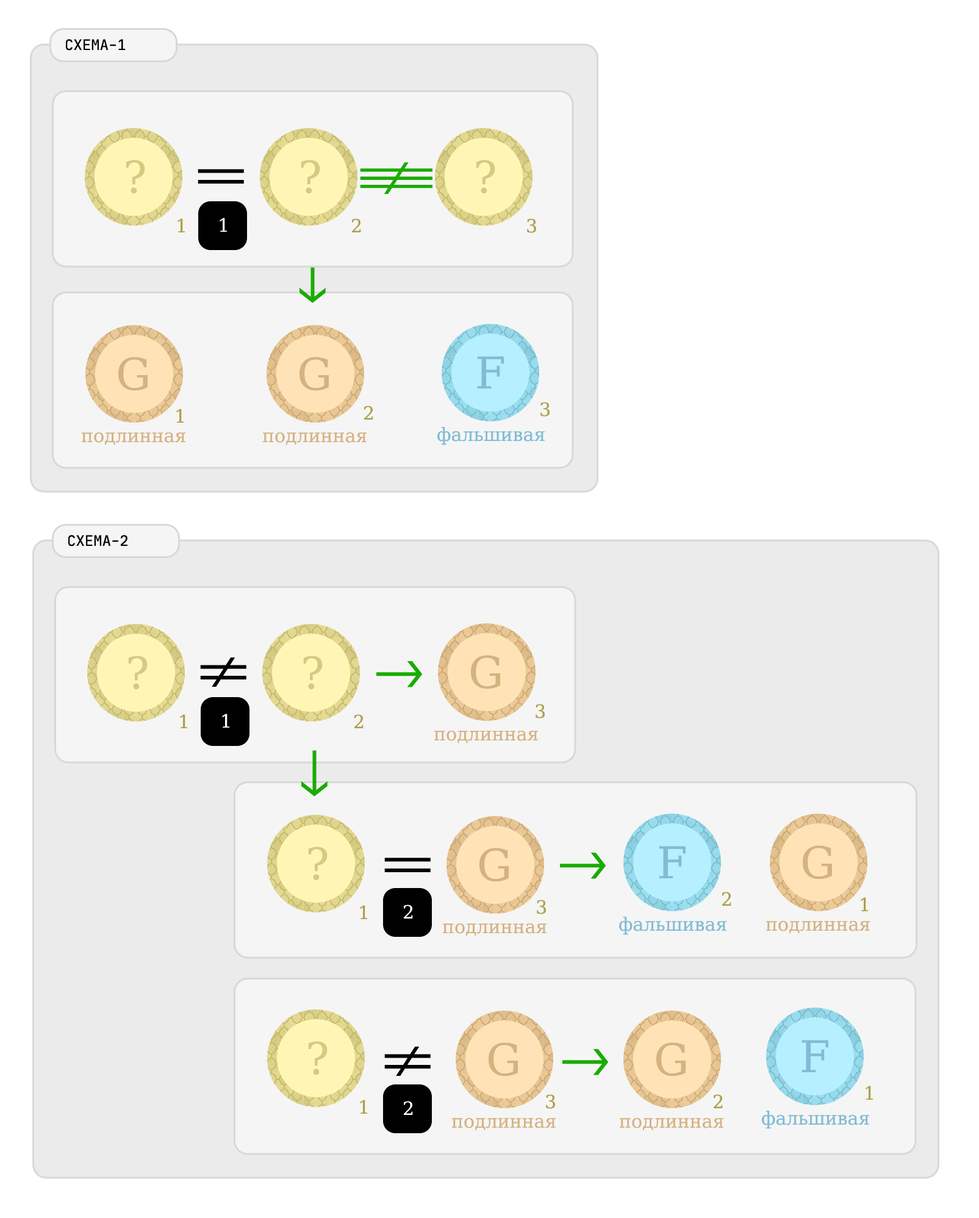
<style>
.page{position:relative;width:979px;height:1218px;background:#ffffff}
.page>*{position:absolute;margin:0}
.t1{font:14.6px "JetBrainsMono-Regular";color:#000000}
.t2{font:43.9px "DejaVuSerif";color:#d5ca81}
.t3{font:43.9px "JetBrainsMono-Regular";color:#000000}
.t4{font:43.9px "JetBrainsMono-Regular";color:#19ac01}
.t5{font:18.3px "DejaVuSerif";color:#ada04a}
.t6{font:18.3px "DejaVuSerif";color:#ffffff}
.t7{font:43.9px "DejaVuSerif";color:#d5b281}
.t8{font:43.9px "DejaVuSerif";color:#81bcd5}
.t9{font:18.3px "DejaVuSerif";color:#d5b281}
.t10{font:18.3px "DejaVuSerif";color:#81bcd5}
</style>
<div class="page">
<p class="t1" style="left:66px;top:39px;width:60px;height:12px">СХЕМА-1</p>
<p class="t2" style="left:126px;top:160px;width:19px;height:34px">?</p>
<p class="t2" style="left:301px;top:160px;width:19px;height:34px">?</p>
<p class="t2" style="left:476px;top:160px;width:19px;height:34px">?</p>
<p class="t3" style="left:198px;top:169px;width:46px;height:15px">==</p>
<p class="t4" style="left:360px;top:162px;width:72px;height:32px">!==</p>
<p class="t5" style="left:177px;top:218px;width:8px;height:14px">1</p>
<p class="t6" style="left:220px;top:218px;width:7px;height:14px">1</p>
<p class="t5" style="left:352px;top:218px;width:9px;height:14px">2</p>
<p class="t5" style="left:527px;top:218px;width:9px;height:15px">3</p>
<p class="t4" style="left:299px;top:257px;width:27px;height:46px;rotate:90deg">-&gt;</p>
<p class="t7" style="left:118px;top:357px;width:30px;height:34px">G</p>
<p class="t7" style="left:299px;top:357px;width:30px;height:34px">G</p>
<p class="t8" style="left:477px;top:356px;width:27px;height:33px">F</p>
<p class="t5" style="left:540px;top:402px;width:10px;height:15px">3</p>
<p class="t5" style="left:176px;top:409px;width:8px;height:14px">1</p>
<p class="t5" style="left:364px;top:406px;width:9px;height:14px">2</p>
<p class="t9" style="left:82px;top:432px;width:103px;height:13px">подлинная</p>
<p class="t9" style="left:263px;top:432px;width:104px;height:13px">подлинная</p>
<p class="t10" style="left:437px;top:427px;width:108px;height:18px">фальшивая</p>
<p class="t1" style="left:68px;top:535px;width:59px;height:12px">СХЕМА-2</p>
<p class="t2" style="left:128px;top:656px;width:20px;height:34px">?</p>
<p class="t3" style="left:200px;top:658px;width:46px;height:29px">!=</p>
<p class="t2" style="left:303px;top:656px;width:20px;height:34px">?</p>
<p class="t4" style="left:376px;top:661px;width:47px;height:26px">-&gt;</p>
<p class="t7" style="left:471px;top:655px;width:29px;height:34px">G</p>
<p class="t6" style="left:222px;top:714px;width:7px;height:14px">1</p>
<p class="t5" style="left:536px;top:704px;width:9px;height:15px">3</p>
<p class="t5" style="left:180px;top:714px;width:7px;height:14px">1</p>
<p class="t5" style="left:354px;top:714px;width:10px;height:14px">2</p>
<p class="t9" style="left:434px;top:731px;width:104px;height:13px">подлинная</p>
<p class="t4" style="left:301px;top:750px;width:27px;height:47px;rotate:90deg">-&gt;</p>
<p class="t8" style="left:659px;top:846px;width:27px;height:32px">F</p>
<p class="t7" style="left:803px;top:845px;width:29px;height:35px">G</p>
<p class="t2" style="left:308px;top:847px;width:20px;height:34px">?</p>
<p class="t3" style="left:384px;top:858px;width:47px;height:14px">==</p>
<p class="t7" style="left:479px;top:848px;width:30px;height:34px">G</p>
<p class="t4" style="left:560px;top:853px;width:46px;height:26px">-&gt;</p>
<p class="t5" style="left:722px;top:892px;width:9px;height:14px">2</p>
<p class="t5" style="left:360px;top:905px;width:7px;height:14px">1</p>
<p class="t6" style="left:404px;top:905px;width:9px;height:14px">2</p>
<p class="t5" style="left:537px;top:900px;width:9px;height:14px">3</p>
<p class="t5" style="left:861px;top:897px;width:7px;height:14px">1</p>
<p class="t10" style="left:619px;top:917px;width:107px;height:18px">фальшивая</p>
<p class="t9" style="left:443px;top:923px;width:104px;height:13px">подлинная</p>
<p class="t9" style="left:766px;top:921px;width:104px;height:13px">подлинная</p>
<p class="t2" style="left:308px;top:1041px;width:20px;height:34px">?</p>
<p class="t3" style="left:384px;top:1047px;width:47px;height:29px">!=</p>
<p class="t7" style="left:489px;top:1042px;width:29px;height:35px">G</p>
<p class="t4" style="left:562px;top:1049px;width:47px;height:26px">-&gt;</p>
<p class="t7" style="left:656px;top:1042px;width:30px;height:35px">G</p>
<p class="t8" style="left:801px;top:1040px;width:27px;height:32px">F</p>
<p class="t5" style="left:866px;top:1086px;width:7px;height:14px">1</p>
<p class="t5" style="left:546px;top:1094px;width:9px;height:15px">3</p>
<p class="t5" style="left:714px;top:1094px;width:9px;height:14px">2</p>
<p class="t5" style="left:360px;top:1100px;width:7px;height:14px">1</p>
<p class="t6" style="left:404px;top:1101px;width:9px;height:14px">2</p>
<p class="t9" style="left:452px;top:1118px;width:104px;height:13px">подлинная</p>
<p class="t9" style="left:620px;top:1118px;width:103px;height:13px">подлинная</p>
<p class="t10" style="left:762px;top:1111px;width:107px;height:18px">фальшивая</p>
</div>
